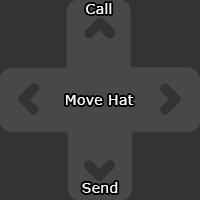
<style>
.page{position:relative;width:200px;height:200px;background:#333333}
.page>*{position:absolute;margin:0}
.t1{font:14px "Verdana";letter-spacing:0.025em;color:#ffffff}
</style>
<div class="page">
<p class="t1" style="left:86px;top:3px;width:26px;height:11px">Call</p>
<p class="t1" style="left:66px;top:95px;width:68px;height:10px">Move Hat</p>
<p class="t1" style="left:82px;top:182px;width:36px;height:11px">Send</p>
</div>
